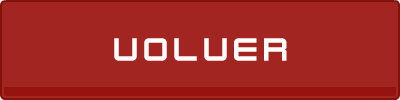
<style>
.page{position:relative;width:400px;height:100px;background:#a32521}
.page>*{position:absolute;margin:0}
.t1{font:36px "KenVector-Future";color:#ffffff}
</style>
<div class="page">
<p class="t1" style="left:114px;top:38px;width:173px;height:23px">volver</p>
</div>
